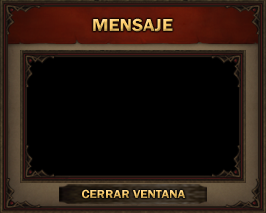
<style>
.page{position:relative;width:266px;height:213px;background:#000000}
.page>*{position:absolute;margin:0}
.t1{font:18px "FranklinGothic-Demi";scale:1.07 1}
.t2{font:12px "FranklinGothic-Demi";scale:1.07 1}
</style>
<div class="page">
<p class="t1" style="left:93px;top:18px;width:80px;height:14px">MENSAJE</p>
<p class="t2" style="left:82px;top:189px;width:104px;height:10px">CERRAR VENTANA</p>
</div>
